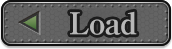
<style>
.page{position:relative;width:172px;height:49px}
.page>*{position:absolute;margin:0}
.t1{font:30px "RyuminPro-ExBold";letter-spacing:-0.04em;color:#b8b8b8}
</style>
<div class="page">
<p class="t1" style="left:70px;top:11px;width:67px;height:24px">Load</p>
</div>
